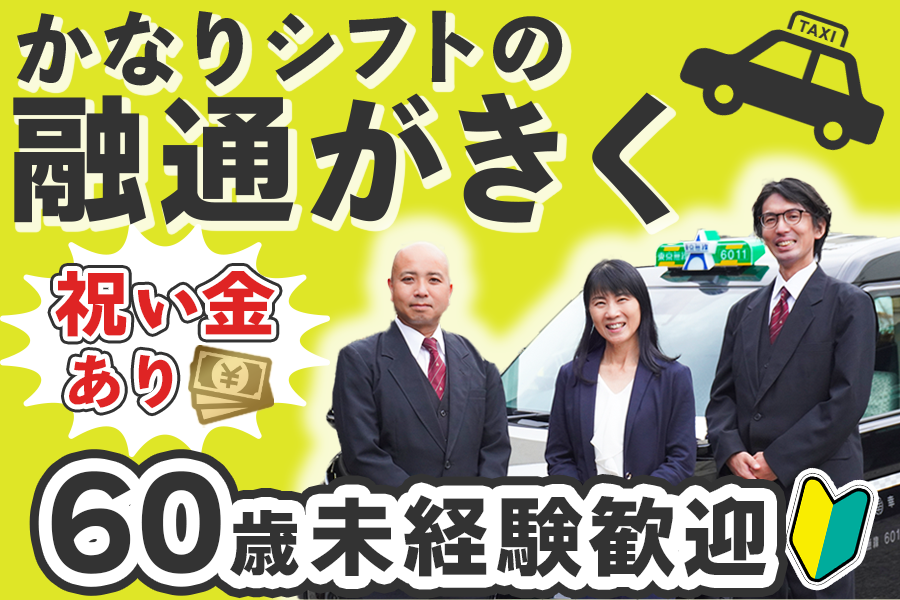
<style>
.page{position:relative;width:900px;height:600px;background:#dfe627}
.page>*{position:absolute;margin:0}
.t1{font:81px "BokutohRuika-07";letter-spacing:0.1em;color:#333333}
.t2{font:81px "BokutohRuika-07";letter-spacing:0.075em;color:#333333}
.t3{font:141.2px "BokutohRuika-07";letter-spacing:0.05em;color:#333333}
.t4{font:57.4px/71.8px "BokutohRuika-07";letter-spacing:0.15em;color:#df2424}
.t5{font:72.7px/71.8px "BokutohRuika-07";letter-spacing:0.075em;color:#df2424}
.t6{font:65.1px/71.8px "BokutohRuika-07";letter-spacing:0.075em;color:#df2424}
.t7{font:88.3px "BokutohRuika-07";letter-spacing:0.05em;color:#333333}
.t8{font:125.8px "BokutohRuika-07";color:#333333}
.t9{font:72.2px "BokutohRuika-07";letter-spacing:0.1em;color:#333333}
</style>
<div class="page">
<p class="t1" style="left:16px;top:11px;width:227px;height:76px">かなり</p>
<p class="t2" style="left:266px;top:10px;width:297px;height:72px">シフトの</p>
<p class="t3" style="left:13px;top:92px;width:658px;height:133px">融通がきく</p>
<p class="t4" style="left:55px;top:271px;width:220px;height:138px"><span class="t5">祝</span><span class="t6">い</span><span class="t5">金<br>　</span>あり</p>
<p class="t7" style="left:51px;top:471px;width:716px;height:107px"><span class="t8">60</span><span class="t9">歳</span>未経験歓迎</p>
</div>
